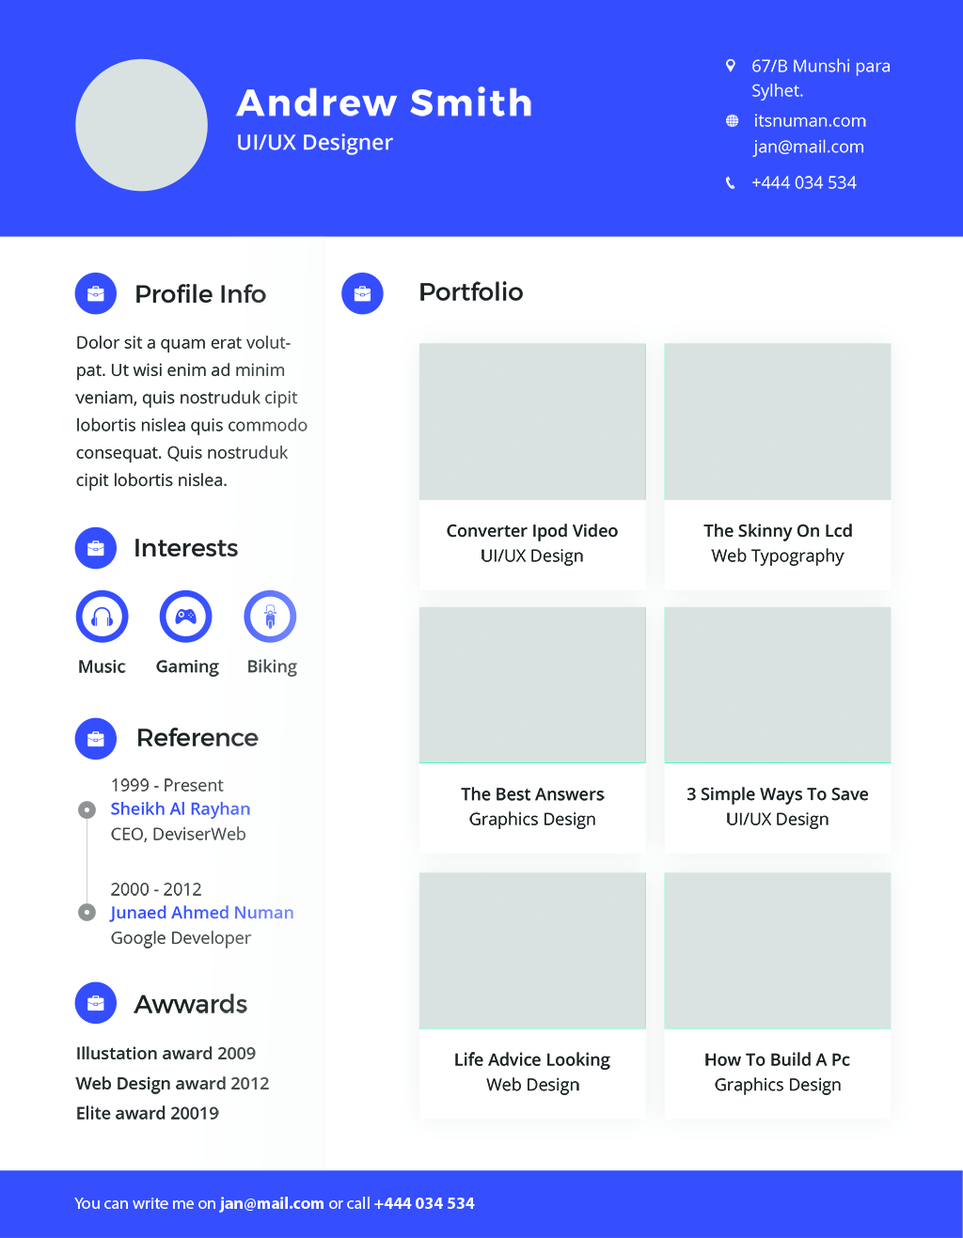
<style>
.page{position:relative;width:963px;height:1238px;background:#ffffff}
.page>*{position:absolute;margin:0}
.t1{font:16.8px/24.5px "OpenSans";color:#ffffff}
.t2{font:36.7px "Montserrat-Bold";letter-spacing:0.06em;color:#ffffff}
.t3{font:16.8px/26px "OpenSans";color:#ffffff}
.t4{font:21.4px "OpenSans-Semibold";color:#ffffff}
.t5{font:16.8px "OpenSans";color:#ffffff}
.t6{font:24.5px "Montserrat-Regular";color:#1c2223}
.t7{font:16.8px/27.5px "OpenSans";color:#252c2d}
.t8{font:16.8px "OpenSans-Semibold";color:#1c2223}
.t9{font:16.8px "OpenSans";color:#1c2223}
.t10{font:16.8px "OpenSans-Semibold";color:#252c2d}
.t11{font:16.8px "OpenSans-Semibold";color:#495252}
.t12{font:16.8px "OpenSans";color:#414647}
.t13{font:16.8px "OpenSans-Semibold";color:#344eff}
.t14{font:16.8px "OpenSans";color:#434848}
.t15{font:16.8px "OpenSans";color:#404546}
.t16{font:16.8px "OpenSans-Semibold"}
.t17{font:16.8px "OpenSans";color:#424748}
.t18{font:16.8px "MyriadPro-Regular";color:#ffffff}
.t19{font:16.8px "MyriadPro-Bold";color:#ffffff}
</style>
<div class="page">
<p class="t1" style="left:752px;top:58px;width:138px;height:43px">67/B Munshi para<br>Sylhet.</p>
<p class="t2" style="left:235px;top:87px;width:296px;height:30px">Andrew Smith</p>
<p class="t3" style="left:752px;top:114px;width:114px;height:43px">itsnuman.com<br>jan@mail.com</p>
<p class="t4" style="left:238px;top:134px;width:155px;height:21px">UI/UX Designer</p>
<p class="t5" style="left:752px;top:176px;width:105px;height:13px">+444 034 534</p>
<p class="t6" style="left:420px;top:281px;width:103px;height:20px">Portfolio</p>
<p class="t6" style="left:136px;top:284px;width:130px;height:19px">Profile Info</p>
<p class="t7" style="left:75px;top:336px;width:232px;height:155px">Dolor sit a quam erat volutpat. Ut wisi enim ad minim veniam, quis nostruduk cipit lobortis nislea quis commodo consequat. Quis nostruduk cipit lobortis nislea.</p>
<p class="t8" style="left:447px;top:524px;width:171px;height:18px">Converter Ipod Video</p>
<p class="t8" style="left:703px;top:524px;width:149px;height:18px">The Skinny On Lcd</p>
<p class="t6" style="left:135px;top:539px;width:103px;height:18px">Interests</p>
<p class="t9" style="left:481px;top:549px;width:102px;height:17px">UI/UX Design</p>
<p class="t9" style="left:711px;top:548px;width:133px;height:18px">Web Typography</p>
<p class="t10" style="left:79px;top:660px;width:47px;height:13px">Music</p>
<p class="t10" style="left:156px;top:660px;width:63px;height:17px">Gaming</p>
<p class="t11" style="left:248px;top:659px;width:49px;height:18px">Biking</p>
<p class="t6" style="left:138px;top:728px;width:121px;height:19px">Reference</p>
<p class="t12" style="left:112px;top:779px;width:112px;height:13px">1999 - Present</p>
<p class="t8" style="left:461px;top:787px;width:144px;height:14px">The Best Answers</p>
<p class="t8" style="left:687px;top:787px;width:181px;height:18px">3 Simple Ways To Save</p>
<p class="t13" style="left:111px;top:802px;width:139px;height:17px">Sheikh Al Rayhan</p>
<p class="t9" style="left:469px;top:811px;width:126px;height:18px">Graphics Design</p>
<p class="t9" style="left:727px;top:812px;width:101px;height:17px">UI/UX Design</p>
<p class="t14" style="left:111px;top:827px;width:134px;height:16px">CEO, DeviserWeb</p>
<p class="t15" style="left:111px;top:883px;width:90px;height:13px">2000 - 2012</p>
<p class="t16" style="left:109px;top:906px;width:184px;height:16px">Junaed Ahmed Numan</p>
<p class="t17" style="left:111px;top:931px;width:141px;height:18px">Google Developer</p>
<p class="t6" style="left:134px;top:994px;width:113px;height:20px">Awwards</p>
<p class="t10" style="left:77px;top:1047px;width:179px;height:13px">Illustation award 2009</p>
<p class="t8" style="left:455px;top:1052px;width:155px;height:18px">Life Advice Looking</p>
<p class="t8" style="left:705px;top:1052px;width:145px;height:14px">How To Build A Pc</p>
<p class="t10" style="left:75px;top:1077px;width:194px;height:18px">Web Design award 2012</p>
<p class="t9" style="left:486px;top:1078px;width:93px;height:17px">Web Design</p>
<p class="t9" style="left:715px;top:1078px;width:126px;height:17px">Graphics Design</p>
<p class="t10" style="left:77px;top:1106px;width:142px;height:14px">Elite award 20019</p>
<p class="t18" style="left:74px;top:1197px;width:401px;height:16px">You can write me on <span class="t19">jan@mail.com</span> or call <span class="t19">+444 034 534</span></p>
</div>
